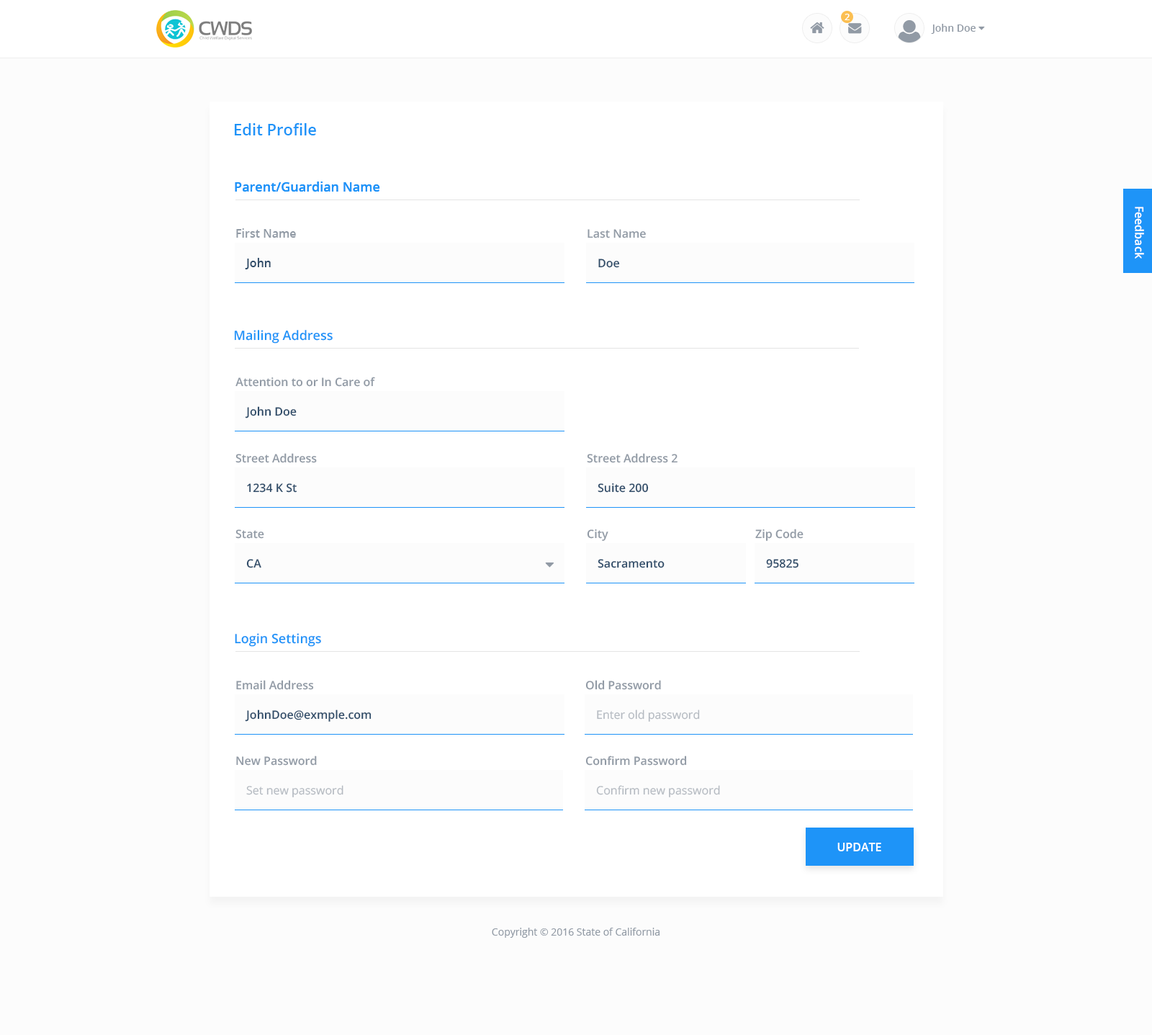
<style>
.page{position:relative;width:1152px;height:1035px;background:#fcfcfc}
.page>*{position:absolute;margin:0}
.t1{font:9.1px "OpenSans-Semibold";color:#ffffff}
.t2{font:15.8px "OpenSans-Semibold";color:#1e94f8}
.t3{font:13px "OpenSans-Semibold";color:#1e94f8}
.t4{font:11.5px "OpenSans-Semibold";color:#ffffff}
.t5{font:11.5px "OpenSans-Semibold";color:#919aa5}
.t6{font:11.5px "OpenSans-Semibold";color:#304d6a}
.t7{font:11.5px "OpenSans";color:#b5bac1}
.t8{font:11.5px "OpenSans-Semibold";color:#ffffff;text-transform:uppercase}
.t9{font:10.1px "OpenSans";color:#919aa5}
</style>
<div class="page">
<p class="t1" style="left:845px;top:14px;width:5px;height:6px">2</p>
<p class="t2" style="left:235px;top:123px;width:81px;height:12px">Edit Profile</p>
<p class="t3" style="left:235px;top:181px;width:145px;height:11px">Parent/Guardian Name</p>
<p class="t3" style="left:235px;top:181px;width:145px;height:11px">Parent/Guardian Name</p>
<p class="t4" style="left:1135px;top:207px;width:9px;height:52px;rotate:90deg">Feedback</p>
<p class="t5" style="left:236px;top:228px;width:60px;height:10px">First Name</p>
<p class="t5" style="left:588px;top:229px;width:58px;height:9px">Last Name</p>
<p class="t6" style="left:245px;top:258px;width:26px;height:11px">John</p>
<p class="t6" style="left:598px;top:259px;width:22px;height:9px">Doe</p>
<p class="t3" style="left:234px;top:330px;width:99px;height:14px">Mailing Address</p>
<p class="t5" style="left:235px;top:377px;width:140px;height:10px">Attention to or In Care of</p>
<p class="t6" style="left:245px;top:406px;width:52px;height:12px">John Doe</p>
<p class="t5" style="left:235px;top:453px;width:82px;height:10px">Street Address</p>
<p class="t5" style="left:587px;top:453px;width:91px;height:10px">Street Address 2</p>
<p class="t6" style="left:247px;top:483px;width:50px;height:10px">1234 K St</p>
<p class="t6" style="left:598px;top:483px;width:51px;height:10px">Suite 200</p>
<p class="t5" style="left:235px;top:529px;width:29px;height:10px">State</p>
<p class="t5" style="left:587px;top:529px;width:22px;height:12px">City</p>
<p class="t5" style="left:755px;top:529px;width:49px;height:12px">Zip Code</p>
<p class="t6" style="left:246px;top:559px;width:15px;height:9px">CA</p>
<p class="t6" style="left:598px;top:559px;width:67px;height:9px">Sacramento</p>
<p class="t6" style="left:766px;top:559px;width:33px;height:9px">95825</p>
<p class="t3" style="left:235px;top:633px;width:86px;height:14px">Login Settings</p>
<p class="t5" style="left:236px;top:680px;width:78px;height:10px">Email Address</p>
<p class="t5" style="left:585px;top:680px;width:76px;height:10px">Old Password</p>
<p class="t6" style="left:245px;top:709px;width:127px;height:13px">JohnDoe@exmple.com</p>
<p class="t7" style="left:597px;top:709px;width:103px;height:13px">Enter old password</p>
<p class="t5" style="left:236px;top:755px;width:81px;height:11px">New Password</p>
<p class="t5" style="left:585px;top:755px;width:102px;height:11px">Confirm Password</p>
<p class="t7" style="left:246px;top:785px;width:98px;height:12px">Set new password</p>
<p class="t7" style="left:596px;top:785px;width:124px;height:12px">Confirm new password</p>
<p class="t8" style="left:838px;top:843px;width:43px;height:8px">Update</p>
<p class="t9" style="left:492px;top:928px;width:168px;height:10px">Copyright © 2016 State of California</p>
</div>
